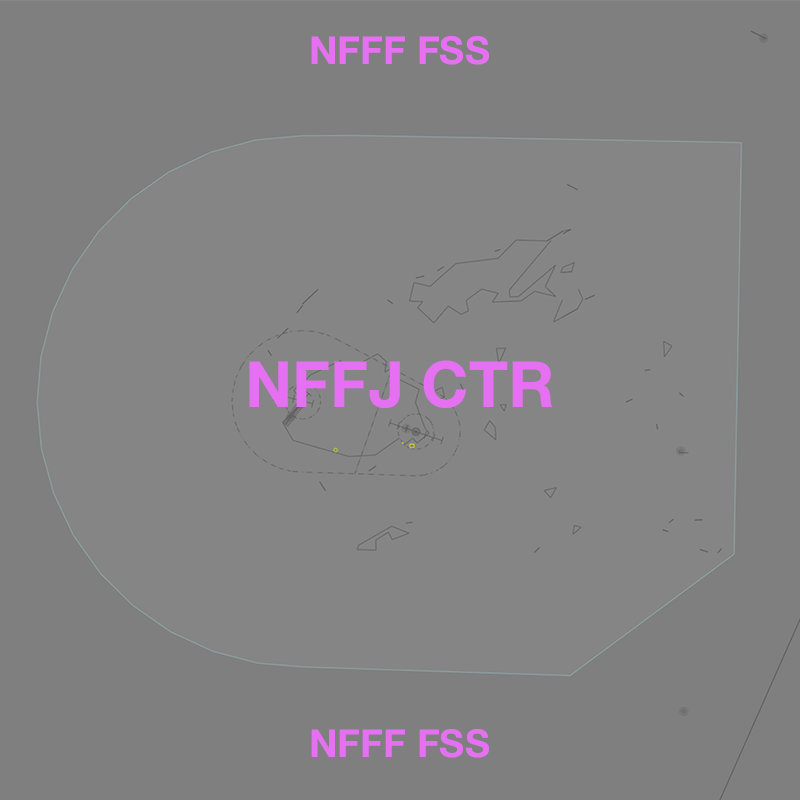
<style>
.page{position:relative;width:800px;height:800px;background:#858585}
.page>*{position:absolute;margin:0}
.t1{font:38.6px "HelveticaNeue-Bold";color:#e570f1}
.t2{font:63.8px "HelveticaNeue-Bold";color:#e570f1}
</style>
<div class="page">
<p class="t1" style="left:311px;top:36px;width:178px;height:29px">NFFF FSS</p>
<p class="t2" style="left:249px;top:360px;width:304px;height:48px">NFFJ CTR</p>
<p class="t1" style="left:311px;top:729px;width:178px;height:29px">NFFF FSS</p>
</div>
